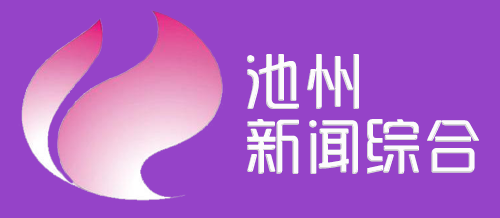
<style>
.page{position:relative;width:500px;height:218px;background:#9543c8}
.page>*{position:absolute;margin:0}
.t1{font:60px/65px "SJyunlvyuan";color:#fdfdfd}
</style>
<div class="page">
<p class="t1" style="left:247px;top:54px;width:232px;height:120px">池州<br>新闻综合</p>
</div>
